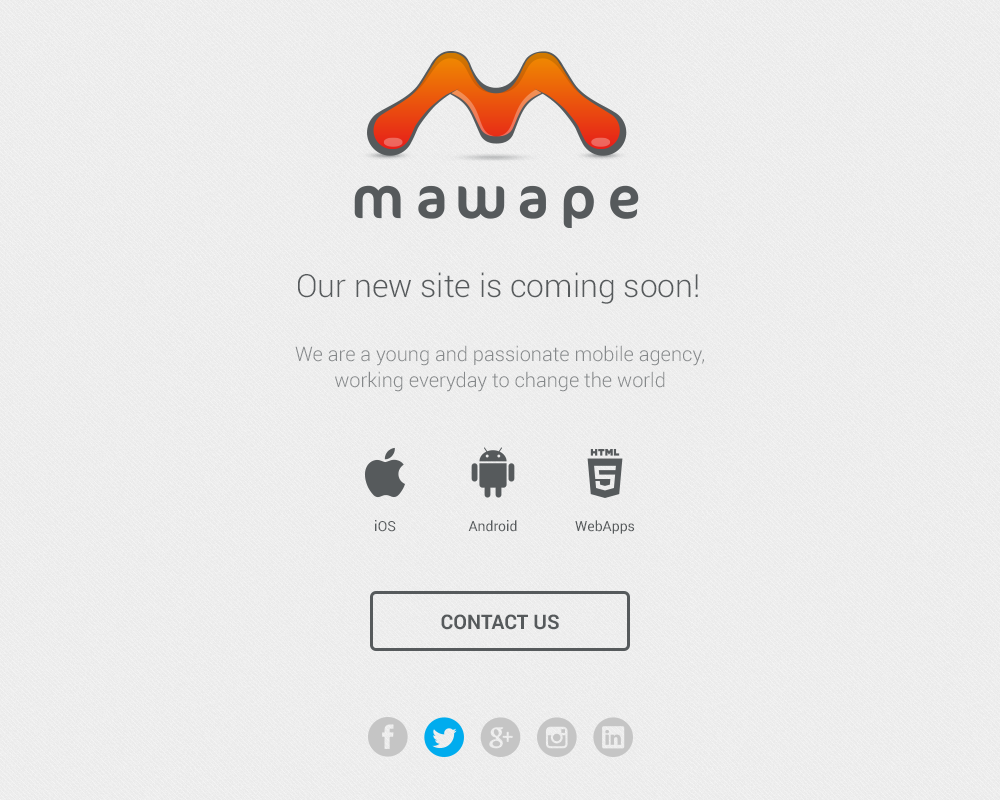
<style>
.page{position:relative;width:1000px;height:800px}
.page>*{position:absolute;margin:0}
.t1{font:32px "Roboto-Light";color:#565a5c}
.t2{font:20px/26px "Roboto-Light";color:#85888a}
.t3{font:14px "Roboto-Regular";color:#565a5c}
.t4{font:20px "Roboto-Bold";color:#565a5c;text-transform:uppercase}
</style>
<div class="page">
<p class="t1" style="left:298px;top:272px;width:400px;height:32px">Our new site is coming soon!</p>
<p class="t2" style="left:295px;top:345px;width:409px;height:47px;text-align:center">We are a young and passionate mobile agency,<br>working everyday to change the world</p>
<p class="t3" style="left:375px;top:520px;width:21px;height:12px">iOS</p>
<p class="t3" style="left:468px;top:520px;width:49px;height:12px">Android</p>
<p class="t3" style="left:575px;top:520px;width:60px;height:14px">WebApps</p>
<p class="t4" style="left:441px;top:614px;width:118px;height:16px">Contact us</p>
</div>
